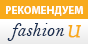
<style>
.page{position:relative;width:88px;height:44px;background:#f8aa1c}
.page>*{position:absolute;margin:0}
.t1{font:11px "MyriadPro-Bold";color:#ffffff;text-transform:uppercase}
.t2{font:19.7px "BellMTItalic";color:#1c3052}
.t3{font:16.9px "BookAntiqua-Italic";color:#f8aa1c;font-weight:bold}
</style>
<div class="page">
<p class="t1" style="left:6px;top:6px;width:77px;height:10px">Рекомендуем</p>
<p class="t2" style="left:7px;top:23px;width:58px;height:18px">fashion</p>
<p class="t3" style="left:68px;top:25px;width:13px;height:13px">U</p>
</div>
